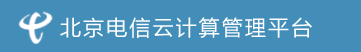
<style>
.page{position:relative;width:361px;height:52px;background:#438eb9}
.page>*{position:absolute;margin:0}
.t1{font:21px "MicrosoftYaHei";letter-spacing:0.1em;color:#ffffff}
</style>
<div class="page">
<p class="t1" style="left:60px;top:17px;width:252px;height:21px">北京电信云计算管理平台</p>
</div>
